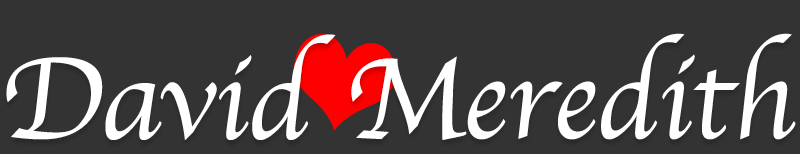
<style>
.page{position:relative;width:800px;height:154px;background:#333333}
.page>*{position:absolute;margin:0}
.t1{font:120px "Apple-Chancery";letter-spacing:-0.01em;color:#ffffff}
</style>
<div class="page">
<p class="t1" style="left:6px;top:34px;width:330px;height:106px">David</p>
<p class="t1" style="left:351px;top:33px;width:445px;height:107px">Meredithh</p>
</div>
